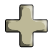
<style>
.page{position:relative;width:53px;height:52px;background:#ffffff}
.page>*{position:absolute;margin:0}
.t1{font:72px "Bungee-Regular";color:#bdb897}
</style>
<div class="page">
<p class="t1" style="left:5px;top:4px;width:43px;height:44px">+</p>
</div>
